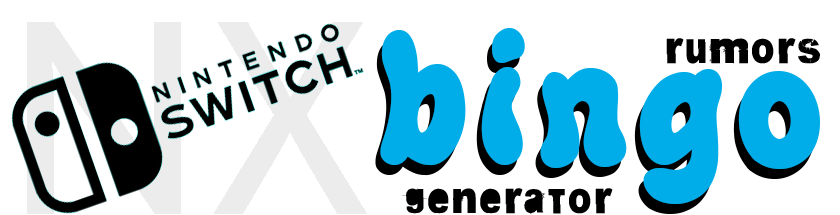
<style>
.page{position:relative;width:840px;height:215px;background:#ffffff}
.page>*{position:absolute;margin:0}
.t1{font:160px "JazzBall-Bold";letter-spacing:0.1em;color:#00ade8}
.t2{font:36px "BugReport";letter-spacing:0.1em;color:#000000}
</style>
<div class="page">
<p class="t1" style="left:380px;top:28px;width:441px;height:176px">bingo</p>
<p class="t1" style="left:375px;top:38px;width:441px;height:176px">bingo</p>
<p class="t2" style="left:666px;top:38px;width:154px;height:26px">rumors</p>
<p class="t2" style="left:402px;top:188px;width:211px;height:26px">generator</p>
</div>
